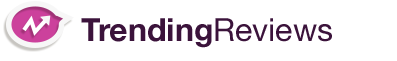
<style>
.page{position:relative;width:397px;height:61px;background:#ffffff}
.page>*{position:absolute;margin:0}
.t1{font:32px "HelveticaNeue-Bold";color:#3b133b}
.t2{font:32px "HelveticaNeue";color:#3b133b}
</style>
<div class="page">
<p class="t1" style="left:81px;top:18px;width:251px;height:30px">Trending<span class="t2">Reviews</span></p>
</div>
